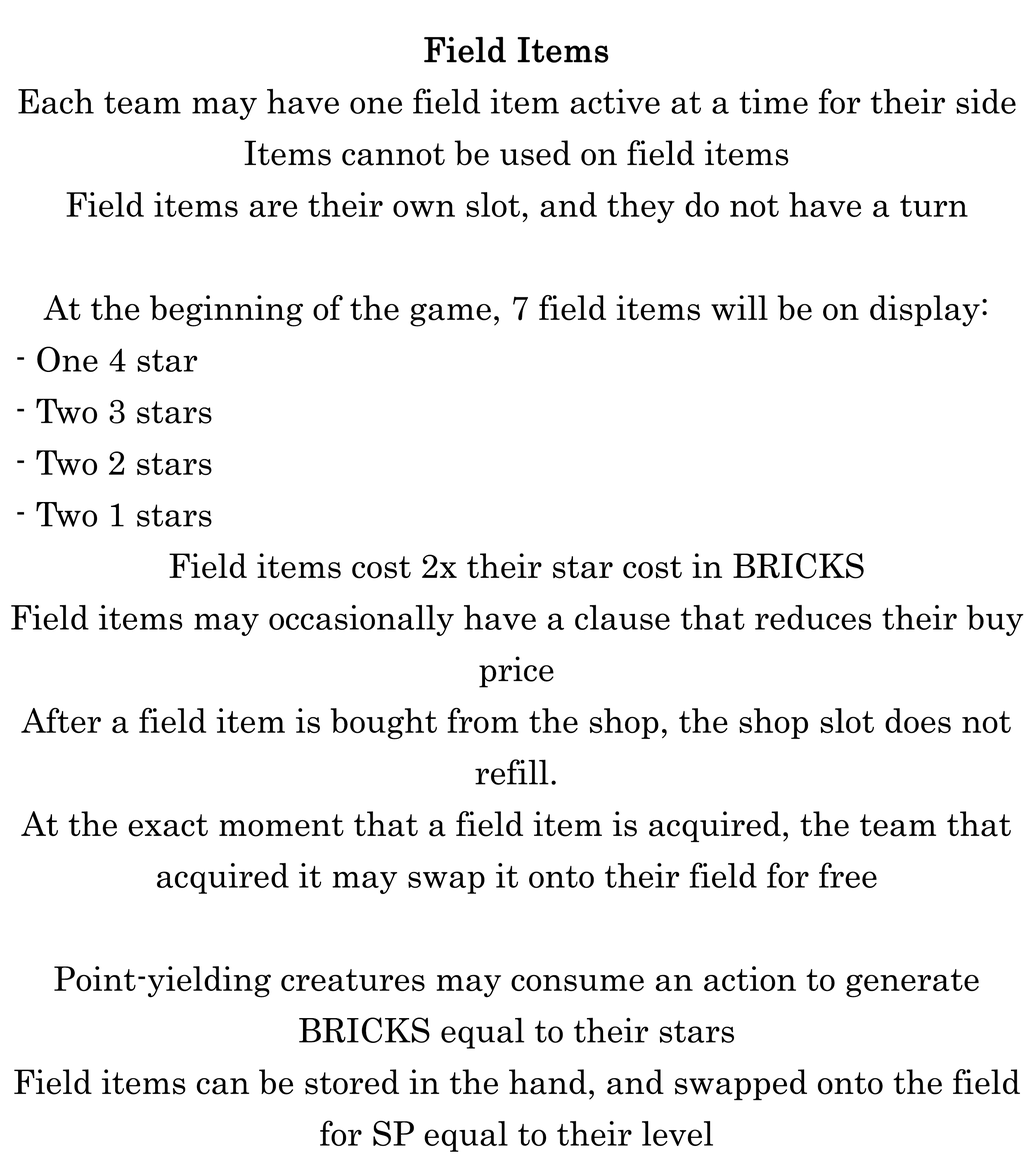
<style>
.page{position:relative;width:1032px;height:1156px;background:#ffffff}
.page>*{position:absolute;margin:0}
.t1{font:57.3px/51.6px "Century";color:#000000}
.t2{font:57.3px/51.6px "Century";color:#000000;font-weight:bold}
</style>
<div class="page">
<p class="t1" style="left:11px;top:37px;width:1012px;height:1115px;text-align:center"><span class="t2">Field Items</span><br>Each team may have one field item active at a time for their side<br>Items cannot be used on field items<br>Field items are their own slot, and they do not have a turn<br><br>At the beginning of the game, 7 field items will be on display:<br> - One 4 star<br> - Two 3 stars<br> - Two 2 stars<br> - Two 1 stars<br>Field items cost 2x their star cost in BRICKS<br>Field items may occasionally have a clause that reduces their buy price<br>After a field item is bought from the shop, the shop slot does not refill.<br>At the exact moment that a field item is acquired, the team that acquired it may swap it onto their field for free<br><br>Point-yielding creatures may consume an action to generate BRICKS equal to their stars<br>Field items can be stored in the hand, and swapped onto the field for SP equal to their level</p>
</div>
